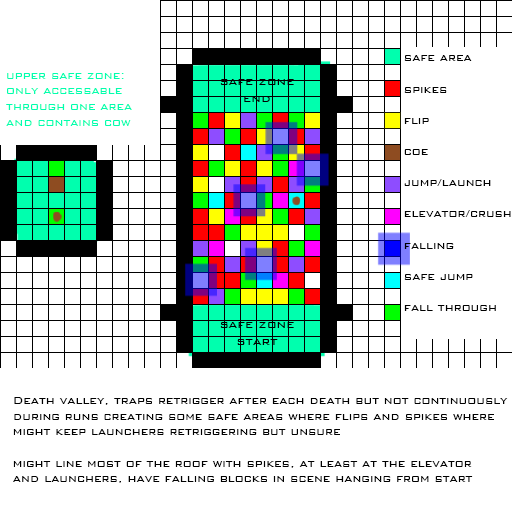
<style>
.page{position:relative;width:512px;height:512px;background:#ffffff}
.page>*{position:absolute;margin:0}
.t1{font:13px "BankGothic-Light";color:#000000}
.t2{font:13px "BankGothic-Light";color:#00ffae}
.t3{font:14px "BankGothic-Light";color:#000000}
</style>
<div class="page">
<p class="t1" style="left:404px;top:55px;width:107px;height:256px">safe area<br><br>spikes<br><br>flip<br><br>coe<br><br>jump/launch<br><br>elevator/crush<br><br>falling<br><br>safe jump<br><br>fall through</p>
<p class="t2" style="left:6px;top:73px;width:126px;height:53px">upper safe zone:<br>only accessable<br>through one area<br>and contains cow</p>
<p class="t3" style="left:220px;top:79px;width:74px;height:23px;text-align:center">safe zone<br>end</p>
<p class="t3" style="left:220px;top:322px;width:74px;height:23px;text-align:center">safe zone<br>start</p>
<p class="t1" style="left:13px;top:397px;width:495px;height:86px">Death valley, traps retrigger after each death but not continuously<br>during runs creating some safe areas where flips and spikes where<br>might keep launchers retriggering but unsure<br><br>might line most of the roof with spikes, at least at the elevator<br>and launchers, have falling blocks in scene hanging from start</p>
</div>
